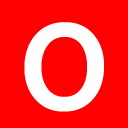
<style>
.page{position:relative;width:128px;height:128px;background:#ff0000}
.page>*{position:absolute;margin:0}
.t1{font:120px "MalgunGothicBold";letter-spacing:-0.05em;color:#ffffff;scale:0.95 1}
</style>
<div class="page">
<p class="t1" style="left:24px;top:22px;width:80px;height:90px">O</p>
</div>
